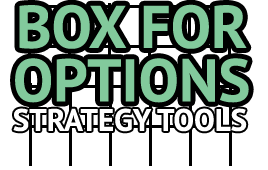
<style>
.page{position:relative;width:268px;height:170px;background:#ffffff}
.page>*{position:absolute;margin:0}
.t1{font:60.2px/53.5px "PTSans-Bold";color:#82ca9c}
.t2{font:30.9px "PTSans-Bold";color:#ffffff}
</style>
<div class="page">
<p class="t1" style="left:15px;top:4px;width:234px;height:99px;text-align:center">BOX FOR<br>OPTIONS</p>
<p class="t2" style="left:13px;top:108px;width:234px;height:24px">STRATEGY TOOLS</p>
</div>
